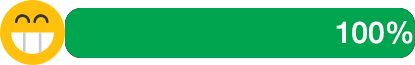
<style>
.page{position:relative;width:415px;height:65px;background:#00a550}
.page>*{position:absolute;margin:0}
.t1{font:30px "HelveticaNeueCyr-Medium";color:#ffffff}
</style>
<div class="page">
<p class="t1" style="left:336px;top:21px;width:77px;height:23px">100%</p>
</div>
